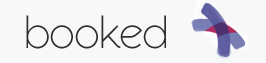
<style>
.page{position:relative;width:266px;height:63px;background:#f8f8f8}
.page>*{position:absolute;margin:0}
.t1{font:48px "RawengulkSans";color:#2f2f2f}
</style>
<div class="page">
<p class="t1" style="left:26px;top:15px;width:140px;height:34px">booked</p>
</div>
